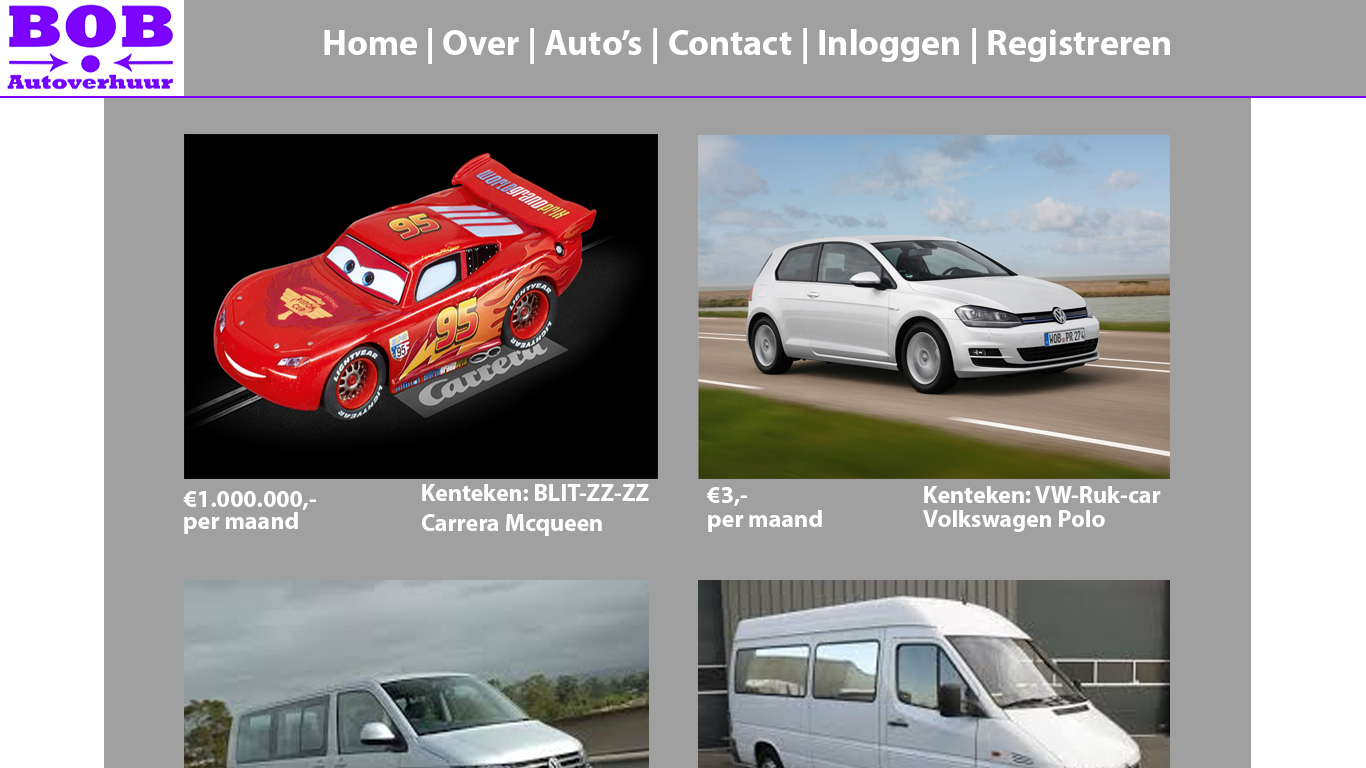
<style>
.page{position:relative;width:1366px;height:768px;background:#a0a0a0}
.page>*{position:absolute;margin:0}
.t1{font:36px "MyriadPro-Bold";color:#ffffff}
.t2{font:24px/30px "MyriadPro-Bold";color:#ffffff}
.t3{font:24px/24px "MyriadPro-Bold";color:#ffffff}
.t4{font:24px "MyriadPro-Bold";color:#ffffff}
</style>
<div class="page">
<p class="t1" style="left:324px;top:28px;width:846px;height:36px">Home | Over | Auto’s | Contact | Inloggen | Registreren</p>
<p class="t2" style="left:422px;top:484px;width:227px;height:52px">Kenteken: BLIT-ZZ-ZZ<br>Carrera Mcqueen</p>
<p class="t3" style="left:707px;top:486px;width:454px;height:46px">€3,-     Kenteken: VW-Ruk-car<br>per maand   Volkswagen Polo</p>
<p class="t4" style="left:183px;top:491px;width:133px;height:19px">€1.000.000,-</p>
<p class="t4" style="left:184px;top:512px;width:114px;height:22px">per maand</p>
</div>
